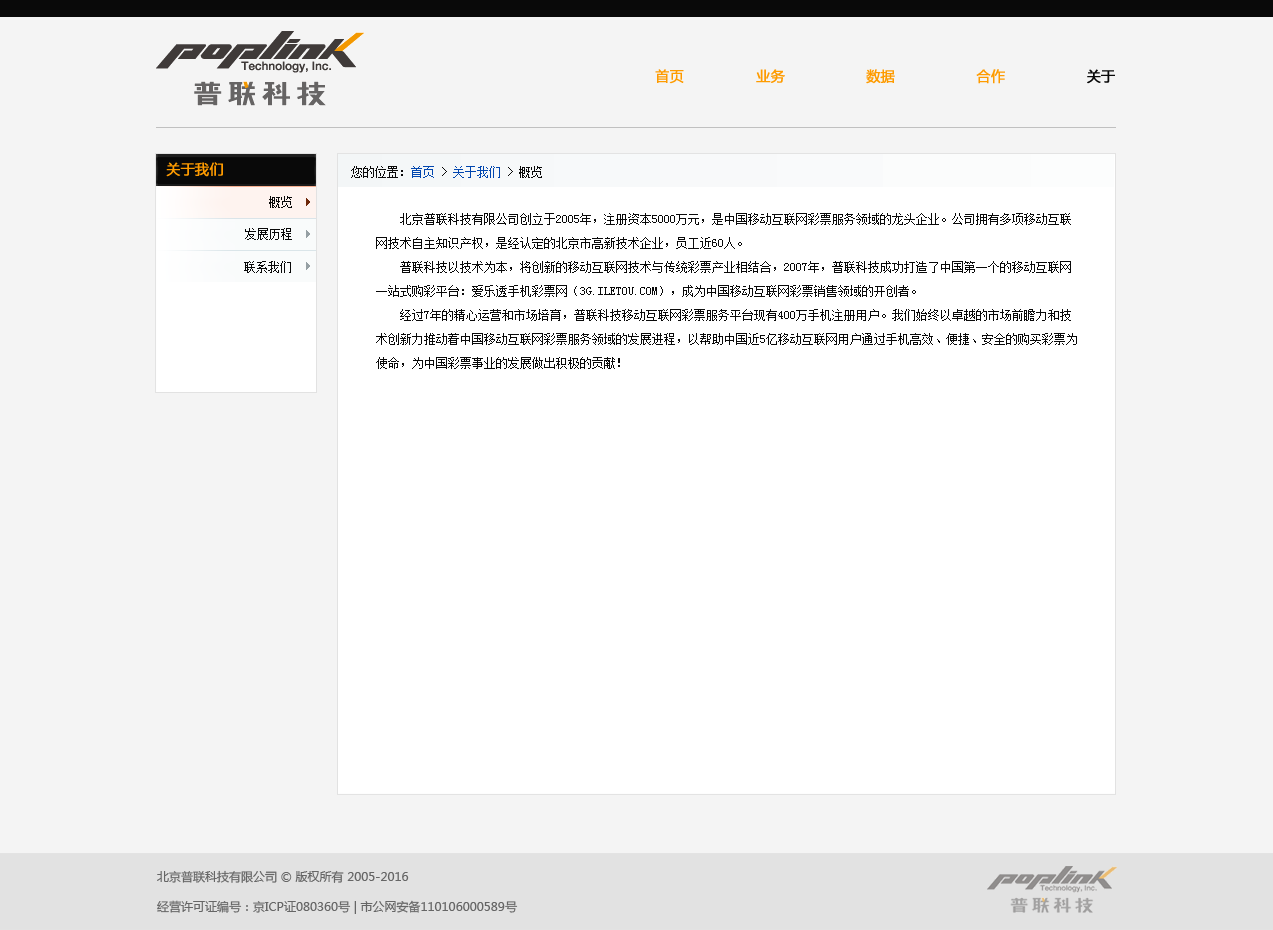
<style>
.page{position:relative;width:1273px;height:930px;background:#f4f4f4}
.page>*{position:absolute;margin:0}
.t1{font:14px "MicrosoftYaHei";color:#fe9b00;text-transform:uppercase;font-weight:bold}
.t2{font:14px "MicrosoftYaHei";color:#090909;text-transform:uppercase;font-weight:bold}
.t3{font:14px "MicrosoftYaHei";color:#fe9b00;font-weight:bold}
.t4{font:12px "SimSun";color:#090909;text-transform:uppercase}
.t5{font:12px "SimSun";color:#0146af;text-transform:uppercase}
.t6{font:12px/24px "SimSun";color:#090909;text-transform:uppercase}
.t7{font:12px/30px "MicrosoftYaHei";color:#666666}
</style>
<div class="page">
<p class="t1" style="left:655px;top:69px;width:460px;height:15px">首页                业务                  数据                  合作                  <span class="t2">关于</span></p>
<p class="t3" style="left:166px;top:162px;width:57px;height:15px">关于我们</p>
<p class="t4" style="left:351px;top:166px;width:191px;height:12px">您的位置：<span class="t5">首页 </span>&gt; <span class="t5">关于我们 </span>&gt; 概览</p>
<p class="t4" style="left:269px;top:196px;width:23px;height:12px">概览</p>
<p class="t6" style="left:376px;top:213px;width:701px;height:156px">北京普联科技有限公司创立于2005年，注册资本5000万元，是中国移动互联网彩票服务领域的龙头企业。公司拥有多项移动互联<br>网技术自主知识产权，是经认定的北京市高新技术企业，员工近60人。<br>    普联科技以技术为本，将创新的移动互联网技术与传统彩票产业相结合，2007年，普联科技成功打造了中国第一个的移动互联网<br>一站式购彩平台：爱乐透手机彩票网（3g.iletou.com），成为中国移动互联网彩票销售领域的开创者。<br>    经过7年的精心运营和市场培育，普联科技移动互联网彩票服务平台现有400万手机注册用户。我们始终以卓越的市场前瞻力和技<br>术创新力推动着中国移动互联网彩票服务领域的发展进程，以帮助中国近5亿移动互联网用户通过手机高效、便捷、安全的购买彩票为<br>使命，为中国彩票事业的发展做出积极的贡献！</p>
<p class="t4" style="left:245px;top:228px;width:47px;height:12px">发展历程</p>
<p class="t4" style="left:244px;top:261px;width:47px;height:12px">联系我们</p>
<p class="t7" style="left:157px;top:870px;width:361px;height:44px">北京普联科技有限公司 © 版权所有 2005-2016<br>经营许可证编号：京ICP证080360号 | 市公网安备110106000589号</p>
</div>
